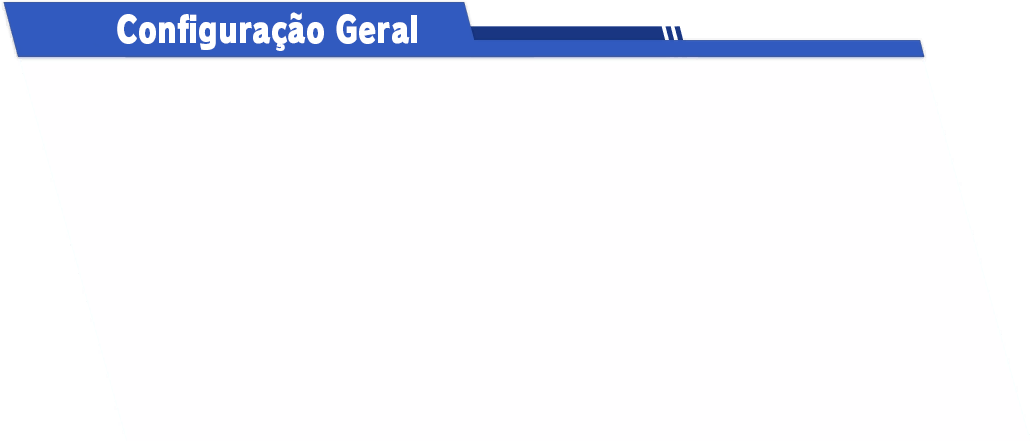
<style>
.page{position:relative;width:1032px;height:442px;background:#fffeff}
.page>*{position:absolute;margin:0}
.t1{font:36px "RodinPro-UB";color:#ffffff;scale:0.8 1}
</style>
<div class="page">
<p class="t1" style="left:117px;top:12px;width:300px;height:39px">Configuração Geral</p>
</div>
